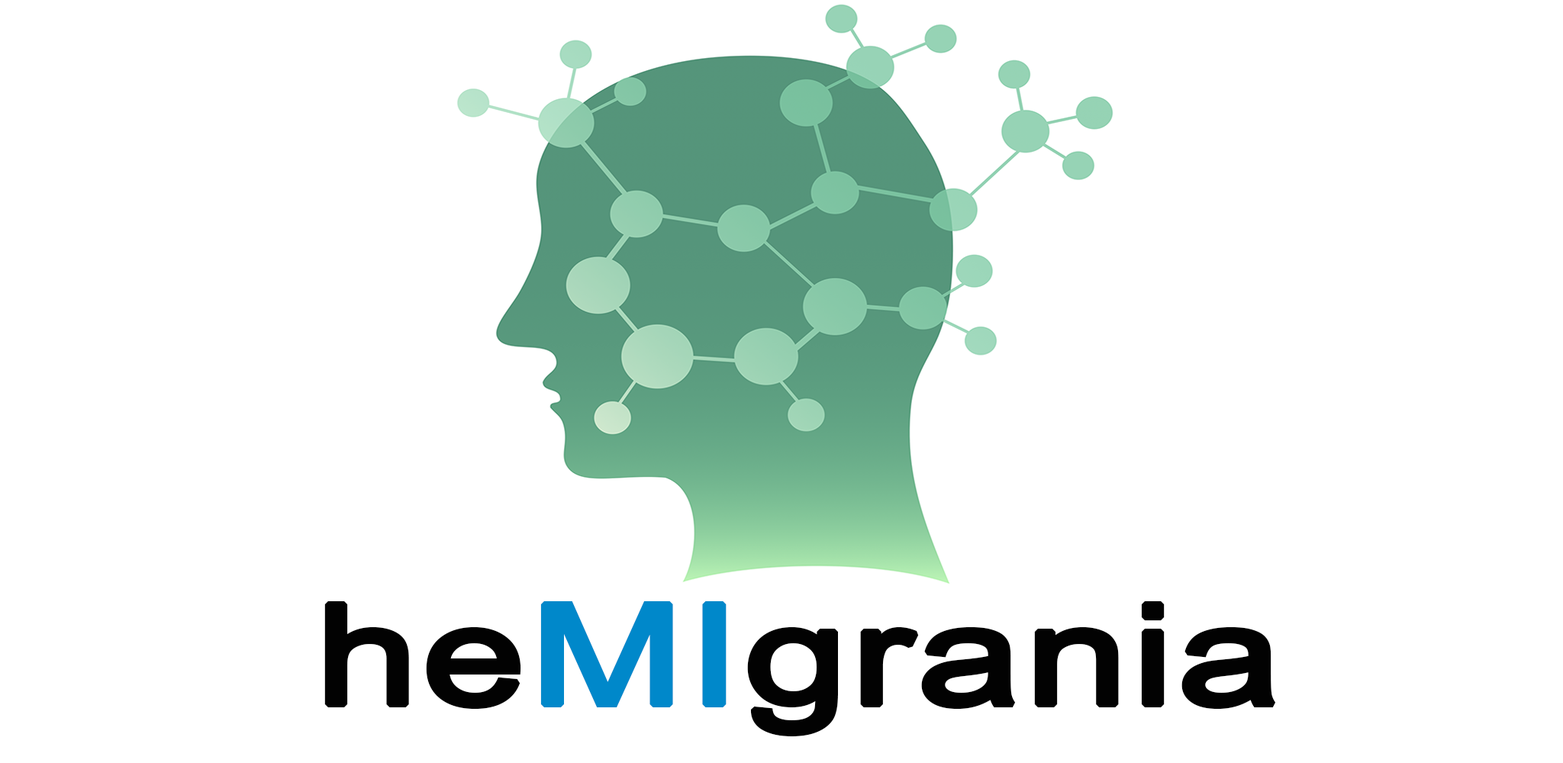
<style>
.page{position:relative;width:1563px;height:763px;background:#ffffff}
.page>*{position:absolute;margin:0}
.t1{font:139.9px "ArialMT";color:#020202;font-weight:bold;scale:1.31 1}
.t2{font:139.9px "ArialMT";color:#0088ca;font-weight:bold;scale:1.31 1}
</style>
<div class="page">
<p class="t1" style="left:324px;top:601px;width:952px;height:136px">he<span class="t2">MI</span>grania</p>
</div>
